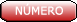
<style>
.page{position:relative;width:77px;height:22px}
.page>*{position:absolute;margin:0}
.t1{font:11px "Verdana";color:#ffffff}
</style>
<div class="page">
<p class="t1" style="left:15px;top:3px;width:48px;height:12px">NÚMERO</p>
</div>
